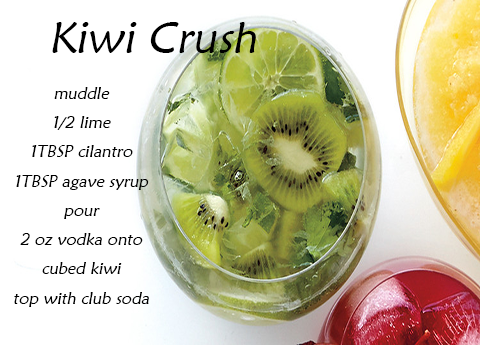
<style>
.page{position:relative;width:480px;height:345px;background:#ffffff}
.page>*{position:absolute;margin:0}
.t1{font:44.5px "MaiandraGD-Regular";color:#000000;font-style:italic}
.t2{font:16.7px "MaiandraGD-Regular";color:#000000;font-style:italic}
</style>
<div class="page">
<p class="t1" style="left:52px;top:22px;width:204px;height:31px">Kiwi Crush</p>
<p class="t2" style="left:14px;top:87px;width:135px;height:220px;text-align:center">muddle <br>1/2 lime<br>1TBSP cilantro<br>1TBSP agave syrup<br>pour <br>2 oz vodka onto<br>cubed kiwi<br>top with club soda</p>
</div>
